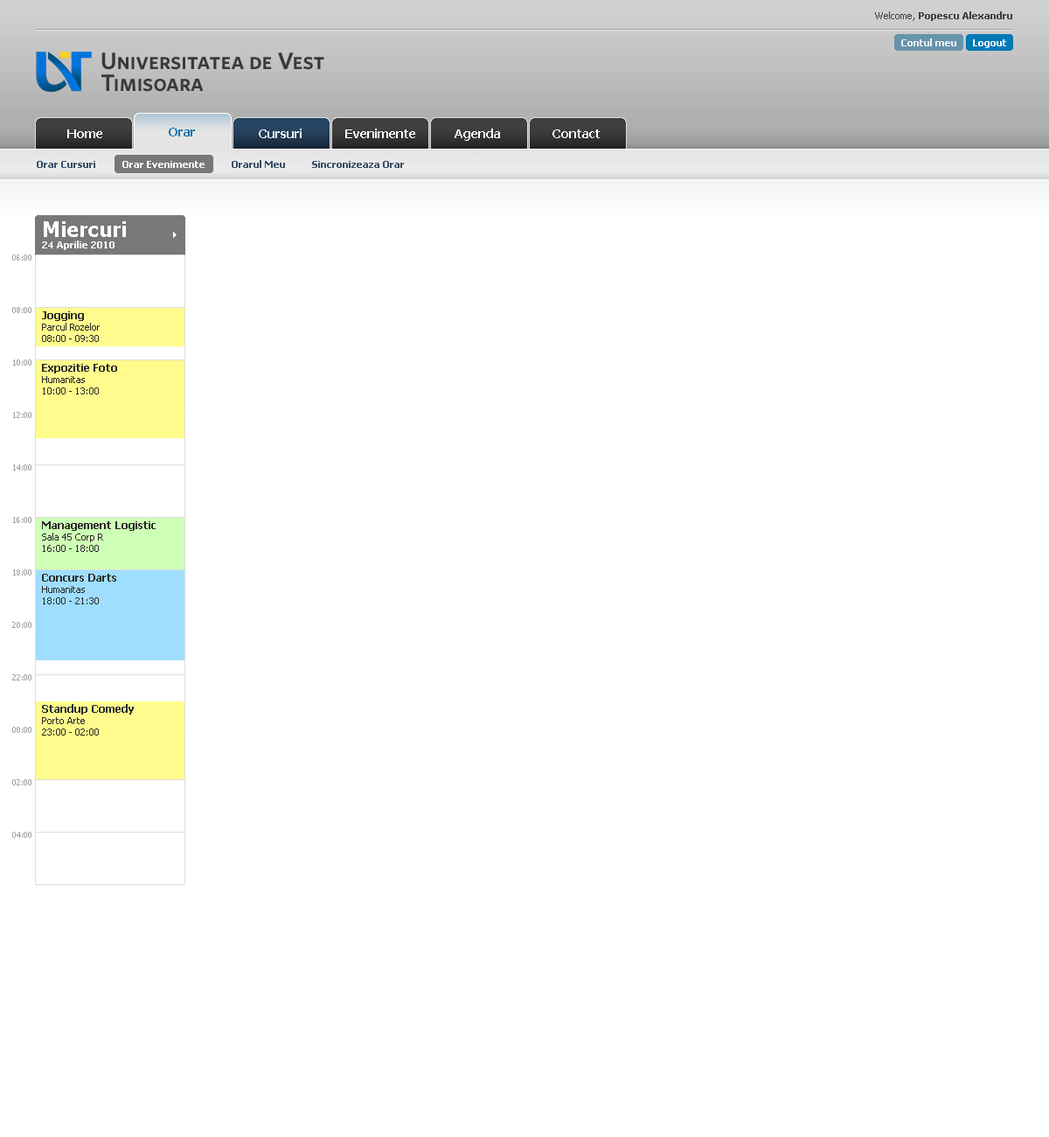
<style>
.page{position:relative;width:1049px;height:1137px;background:#ffffff}
.page>*{position:absolute;margin:0}
.t1{font:9.6px "Tahoma-Bold";color:#404040}
.t2{font:9.6px "Tahoma";color:#404040}
.t3{font:9.6px "Tahoma-Bold";color:#fefefe}
.t4{font:12.2px "Tahoma-Bold";color:#ffffff}
.t5{font:12.2px "Tahoma-Bold";color:#0172ac}
.t6{font:9.6px "Tahoma-Bold";color:#395067}
.t7{font:9.6px "Tahoma-Bold";color:#ffffff}
.t8{font:21px "Tahoma-Bold";color:#ffffff}
.t9{font:7.9px "Tahoma";color:#a0a0a0}
.t10{font:9.6px "Tahoma";color:#292929}
.t11{font:10.5px/15.7px "Tahoma-Bold";color:#292929}
</style>
<div class="page">
<p class="t1" style="left:875px;top:11px;width:137px;height:10px"><span class="t2">Welcome, </span>Popescu Alexandru</p>
<p class="t3" style="left:901px;top:38px;width:55px;height:8px;opacity:0.9">Contul meu</p>
<p class="t3" style="left:973px;top:39px;width:33px;height:9px">Logout</p>
<p class="t4" style="left:67px;top:129px;width:35px;height:9px">Home</p>
<p class="t5" style="left:169px;top:128px;width:26px;height:8px">Orar</p>
<p class="t4" style="left:259px;top:129px;width:43px;height:9px">Cursuri</p>
<p class="t4" style="left:345px;top:129px;width:70px;height:9px">Evenimente</p>
<p class="t4" style="left:455px;top:129px;width:45px;height:12px">Agenda</p>
<p class="t4" style="left:553px;top:129px;width:47px;height:9px">Contact</p>
<p class="t6" style="left:37px;top:160px;width:367px;height:8px">Orar Cursuri          <span class="t7">Orar Evenimente</span>          Orarul Meu          Sincronizeaza Orar</p>
<p class="t7" style="left:42px;top:221px;width:84px;height:29px"><span class="t8">Miercuri<br></span>24 Aprilie 2010</p>
<p class="t9" style="left:12px;top:254px;width:19px;height:7px">06:00</p>
<p class="t9" style="left:12px;top:307px;width:19px;height:6px">08:00</p>
<p class="t10" style="left:42px;top:311px;width:58px;height:31px"><span class="t11">Jogging<br></span>Parcul Rozelor<br>08:00 - 09:30</p>
<p class="t9" style="left:13px;top:359px;width:18px;height:6px">10:00</p>
<p class="t10" style="left:42px;top:364px;width:75px;height:30px"><span class="t11">Expozitie Foto<br></span>Humanitas<br>10:00 - 13:00</p>
<p class="t9" style="left:13px;top:412px;width:18px;height:6px">12:00</p>
<p class="t9" style="left:13px;top:464px;width:18px;height:6px">14:00</p>
<p class="t9" style="left:13px;top:517px;width:18px;height:6px">16:00</p>
<p class="t10" style="left:42px;top:521px;width:114px;height:31px"><span class="t11">Management Logistic<br></span>Sala 45 Corp R<br>16:00 - 18:00</p>
<p class="t9" style="left:13px;top:569px;width:18px;height:6px">18:00</p>
<p class="t10" style="left:42px;top:574px;width:74px;height:30px"><span class="t11">Concurs Darts<br></span>Humanitas<br>18:00 - 21:30</p>
<p class="t9" style="left:12px;top:622px;width:19px;height:6px">20:00</p>
<p class="t9" style="left:12px;top:674px;width:19px;height:6px">22:00</p>
<p class="t10" style="left:42px;top:704px;width:92px;height:31px"><span class="t11">Standup Comedy<br></span>Porto Arte<br>23:00 - 02:00</p>
<p class="t9" style="left:12px;top:727px;width:19px;height:6px">00:00</p>
<p class="t9" style="left:12px;top:779px;width:19px;height:6px">02:00</p>
<p class="t9" style="left:12px;top:831px;width:19px;height:7px">04:00</p>
</div>
